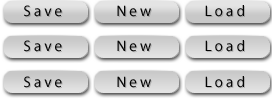
<style>
.page{position:relative;width:272px;height:104px}
.page>*{position:absolute;margin:0}
.t1{font:15.3px "MyriadPro-Regular";letter-spacing:0.2em;color:#040404}
</style>
<div class="page">
<p class="t1" style="left:24px;top:5px;width:38px;height:12px">Save</p>
<p class="t1" style="left:117px;top:5px;width:34px;height:12px">New</p>
<p class="t1" style="left:205px;top:5px;width:39px;height:12px">Load</p>
<p class="t1" style="left:24px;top:40px;width:38px;height:12px">Save</p>
<p class="t1" style="left:117px;top:40px;width:34px;height:12px">New</p>
<p class="t1" style="left:205px;top:40px;width:39px;height:12px">Load</p>
<p class="t1" style="left:24px;top:76px;width:38px;height:12px">Save</p>
<p class="t1" style="left:117px;top:76px;width:34px;height:12px">New</p>
<p class="t1" style="left:205px;top:76px;width:39px;height:12px">Load</p>
</div>
